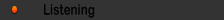
<style>
.page{position:relative;width:224px;height:20px;background:#333333}
.page>*{position:absolute;margin:0}
.t1{font:14.9px "ArialRoundedMTBold";color:#030303;scale:0.78 1}
</style>
<div class="page">
<p class="t1" style="left:44px;top:4px;width:51px;height:14px">Listening</p>
</div>
